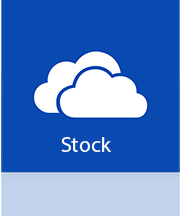
<style>
.page{position:relative;width:180px;height:216px;background:#094ab1}
.page>*{position:absolute;margin:0}
.t1{font:21px "MyriadPro-Regular";color:#ffffff;scale:1.04 1}
</style>
<div class="page">
<p class="t1" style="left:61px;top:137px;width:50px;height:15px">Stock</p>
</div>
